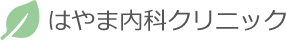
<style>
.page{position:relative;width:286px;height:40px;background:#ffffff}
.page>*{position:absolute;margin:0}
.t1{font:24px "Meiryo-Italic";color:#555555}
</style>
<div class="page">
<p class="t1" style="left:49px;top:9px;width:237px;height:22px">はやま内科クリニック</p>
</div>
